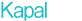
<style>
.page{position:relative;width:82px;height:21px;background:#ffffff}
.page>*{position:absolute;margin:0}
.t1{font:20px "GothicMB101Pro-Regular";letter-spacing:-0.06em;color:#1dbcc0;scale:0.9 1}
</style>
<div class="page">
<p class="t1" style="left:1px;top:2px;width:46px;height:19px">Kapal</p>
</div>
